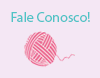
<style>
.page{position:relative;width:100px;height:78px;background:#f4e7f4}
.page>*{position:absolute;margin:0}
.t1{font:14px "MyriadPro-Regular";color:#50c3c6}
</style>
<div class="page">
<p class="t1" style="left:11px;top:12px;width:79px;height:10px">Fale Conosco!</p>
</div>
